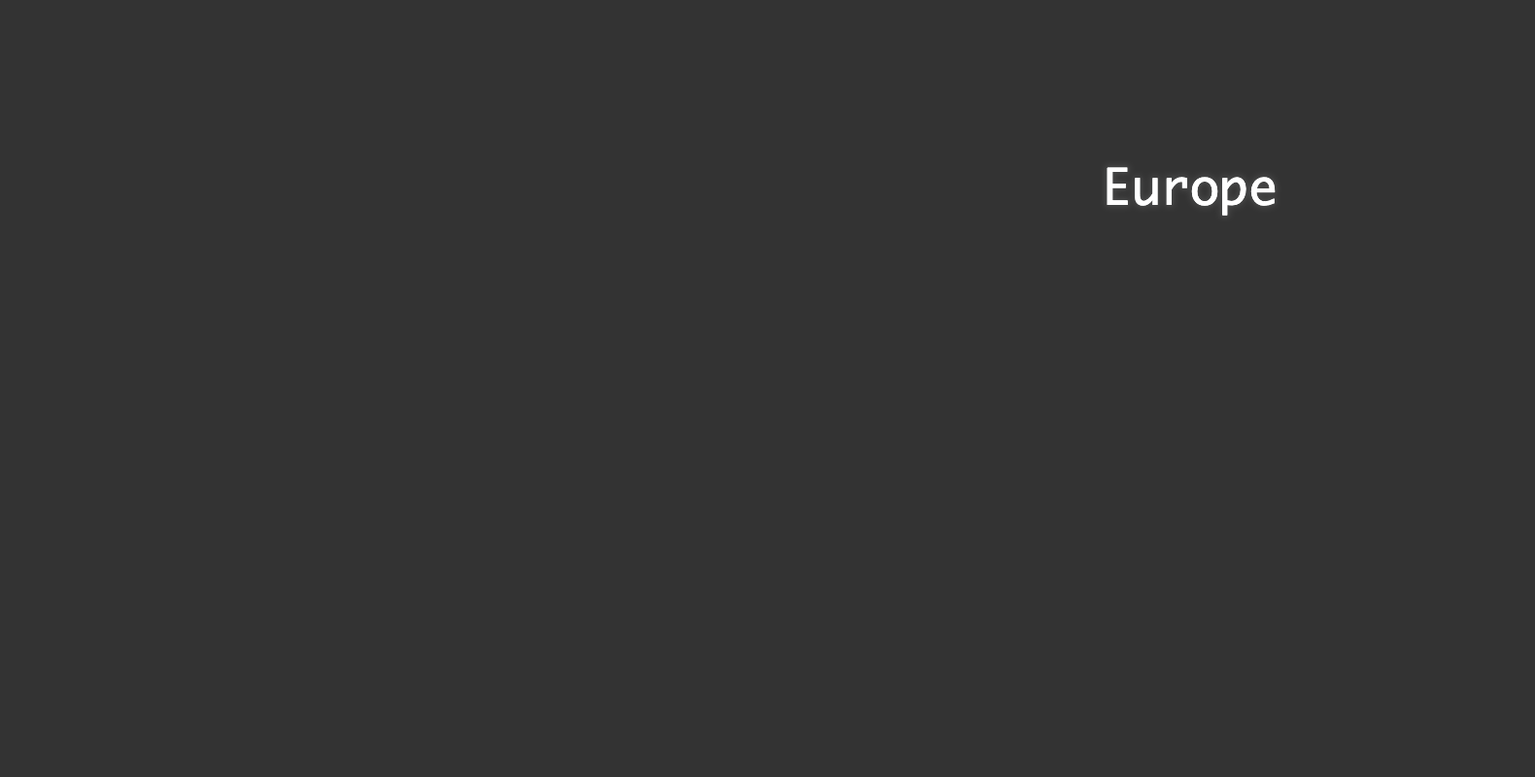
<style>
.page{position:relative;width:1535px;height:777px;background:#333333}
.page>*{position:absolute;margin:0}
.t1{font:48.6px "Ayuthaya";color:#ffffff}
</style>
<div class="page">
<p class="t1" style="left:1106px;top:167px;width:169px;height:49px">Europe</p>
</div>
